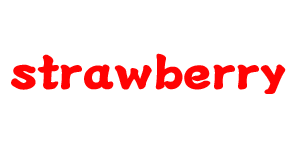
<style>
.page{position:relative;width:300px;height:150px;background:#ffffff}
.page>*{position:absolute;margin:0}
.t1{font:48px "Yj-BACDOO-Bold";color:#ff0303}
</style>
<div class="page">
<p class="t1" style="left:11px;top:53px;width:275px;height:41px">strawberry</p>
</div>
